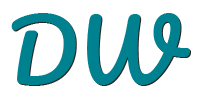
<style>
.page{position:relative;width:200px;height:100px;background:#ffffff}
.page>*{position:absolute;margin:0}
.t1{font:83.3px "Pacifico-Regular";color:#00818f}
</style>
<div class="page">
<p class="t1" style="left:11px;top:13px;width:179px;height:72px">DW</p>
</div>
